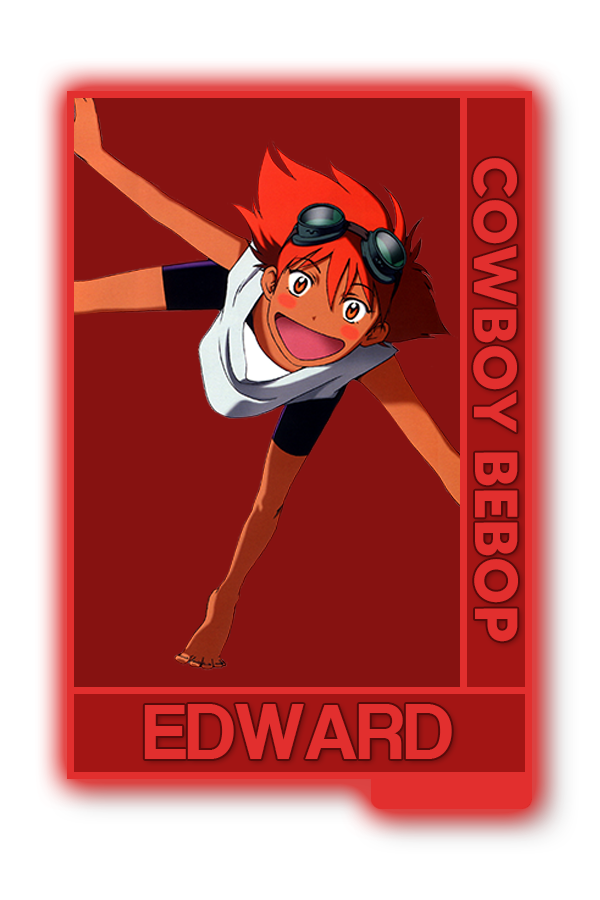
<style>
.page{position:relative;width:600px;height:900px;background:#861211}
.page>*{position:absolute;margin:0}
.t1{font:60.5px "MADETOMMY-Bold";color:#e22f2e}
.t2{font:81.4px "CoolveticaRg-Regular";color:#e22f2e}
</style>
<div class="page">
<p class="t1" style="left:473px;top:158px;width:45px;height:484px;rotate:90deg">COWBOY BEBOP</p>
<p class="t2" style="left:144px;top:704px;width:308px;height:55px">EDWARD</p>
</div>
